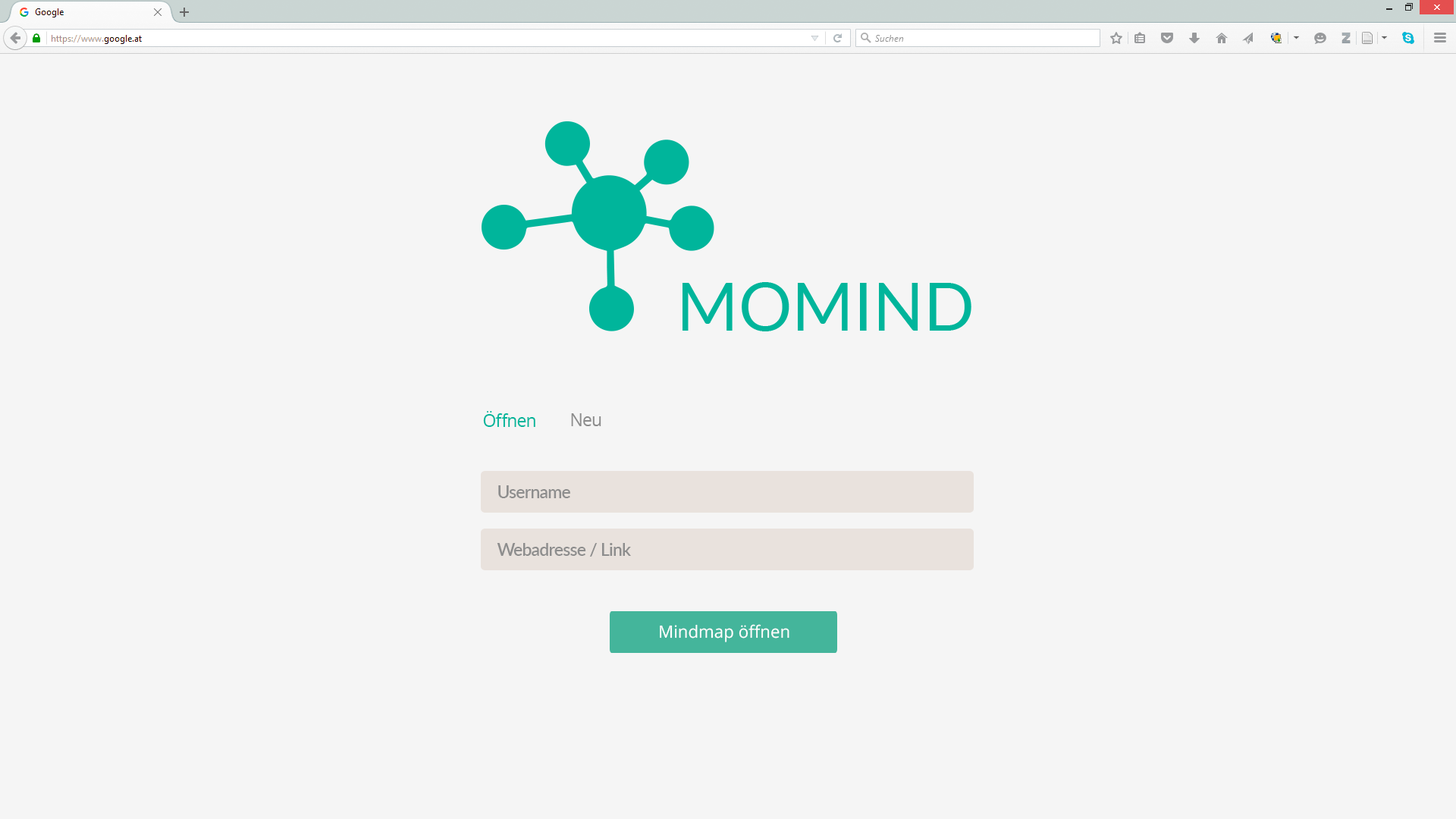
<style>
.page{position:relative;width:1456px;height:819px;background:#f5f5f5}
.page>*{position:absolute;margin:0}
.t1{font:17.1px "OpenSans";letter-spacing:-0.025em;color:#00b59b}
.t2{font:17.1px "OpenSans";letter-spacing:-0.025em;color:#8c8c8c}
.t3{font:17.1px "Lato-Semibold";letter-spacing:-0.025em;color:#8c8c8c}
.t4{font:17.1px "OpenSans";color:#ffffff}
</style>
<div class="page">
<p class="t1" style="left:483px;top:411px;width:52px;height:16px">Öffnen</p>
<p class="t2" style="left:571px;top:413px;width:30px;height:13px">Neu</p>
<p class="t3" style="left:498px;top:485px;width:72px;height:13px">Username</p>
<p class="t3" style="left:497px;top:543px;width:134px;height:14px">Webadresse / Link</p>
<p class="t4" style="left:660px;top:624px;width:129px;height:18px">Mindmap öffnen</p>
</div>
